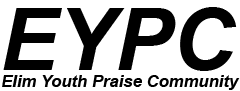
<style>
.page{position:relative;width:240px;height:91px;background:#ffffff}
.page>*{position:absolute;margin:0}
.t1{font:16.7px "Arial-BoldItalicMT";color:#000000}
</style>
<div class="page">
<p class="t1" style="left:2px;top:75px;width:238px;height:15px">Elim Youth Praise Community</p>
</div>
